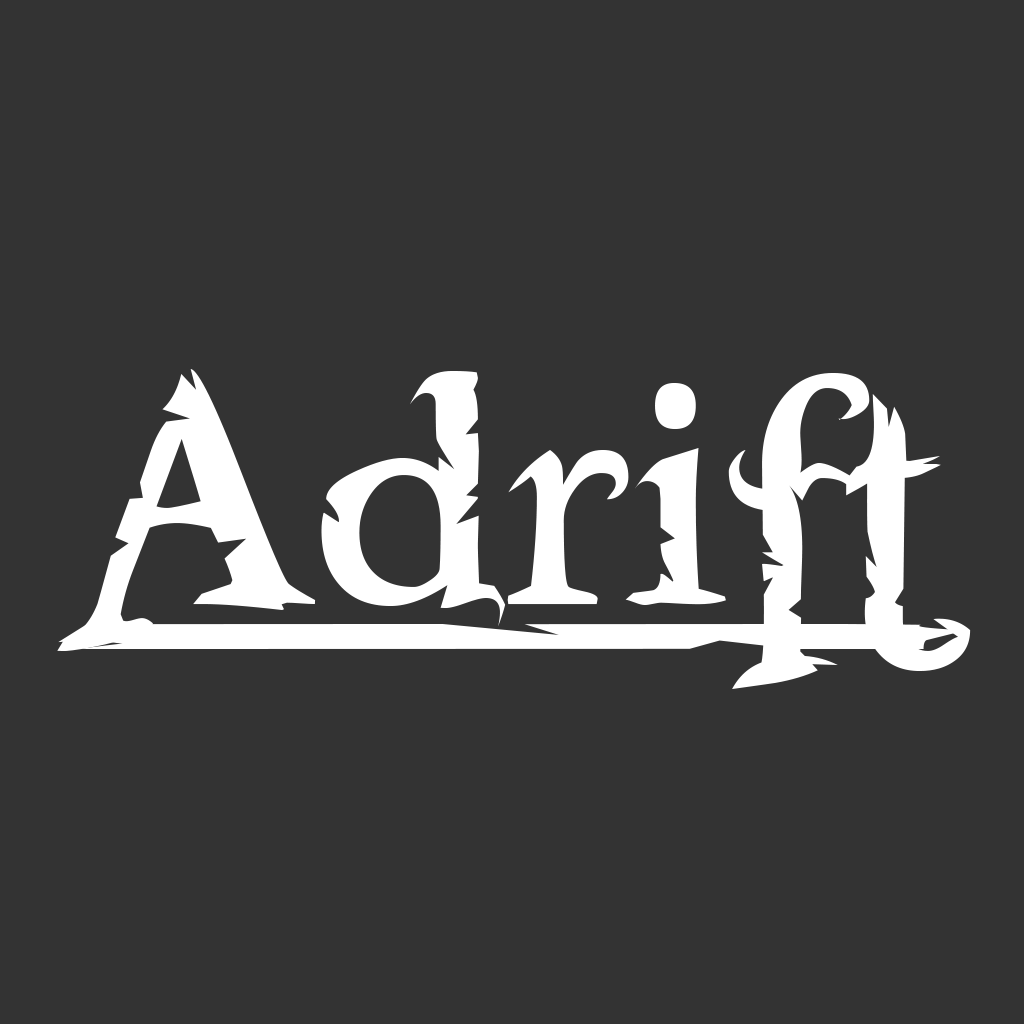
<style>
.page{position:relative;width:1024px;height:1024px;background:#333333}
.page>*{position:absolute;margin:0}
.t1{font:480.1px "Freebooter";color:#ffffff}
.t2{font:480.7px "Freebooter";color:#ffffff;scale:7.65 1}
</style>
<div class="page">
<p class="t1" style="left:57px;top:369px;width:914px;height:320px">Adrift</p>
<p class="t2" style="left:58px;top:624px;width:908px;height:25px">-</p>
</div>
